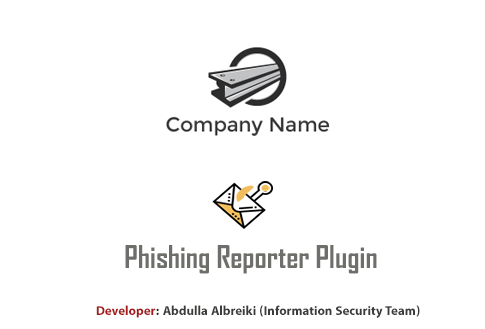
<style>
.page{position:relative;width:485px;height:329px;background:#ffffff}
.page>*{position:absolute;margin:0}
.t1{font:30px "AgencyFB-Bold";color:#6e6e6a}
.t2{font:18px "MyriadArabic-Bold";color:#3b3b3a}
.t3{font:18px "MyriadArabic-Bold";color:#a41a1a}
.t4{font:18px "MyriadArabic-Bold";color:#1f1f1f}
</style>
<div class="page">
<p class="t1" style="left:125px;top:245px;width:252px;height:29px">Phishing Reporter Plugin</p>
<p class="t2" style="left:96px;top:305px;width:324px;height:13px"><span class="t3">Developer</span><span class="t4">: </span>Abdulla Albreiki (Information Security Team)</p>
</div>
